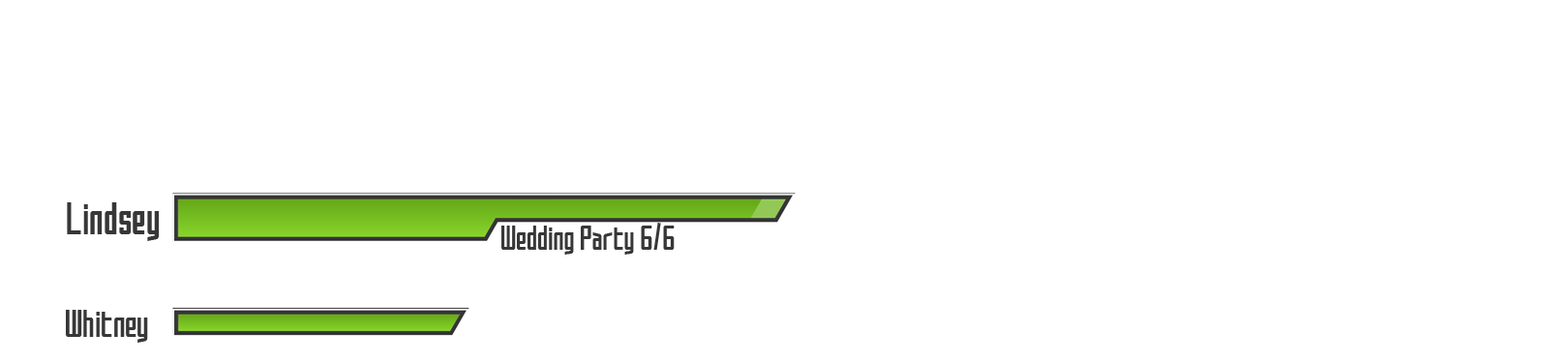
<style>
.page{position:relative;width:1568px;height:364px;background:#ffffff}
.page>*{position:absolute;margin:0}
.t1{font:39.7px "SAOUITT-Regular";color:#373737}
.t2{font:29.8px "SAOUITT-Regular";color:#373737}
.t3{font:33.9px "SAOUITT-Regular";color:#373737}
</style>
<div class="page">
<p class="t1" style="left:67px;top:202px;width:93px;height:39px">Lindsey</p>
<p class="t2" style="left:501px;top:223px;width:174px;height:32px">Wedding Party 6/6</p>
<p class="t3" style="left:66px;top:310px;width:82px;height:33px">Whitney</p>
</div>
